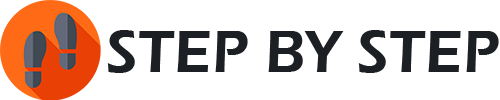
<style>
.page{position:relative;width:500px;height:100px;background:#ffffff}
.page>*{position:absolute;margin:0}
.t1{font:62.3px "ErasITC-Demi";color:#1c2024;text-transform:uppercase}
</style>
<div class="page">
<p class="t1" style="left:107px;top:30px;width:392px;height:43px">Step by step</p>
</div>
